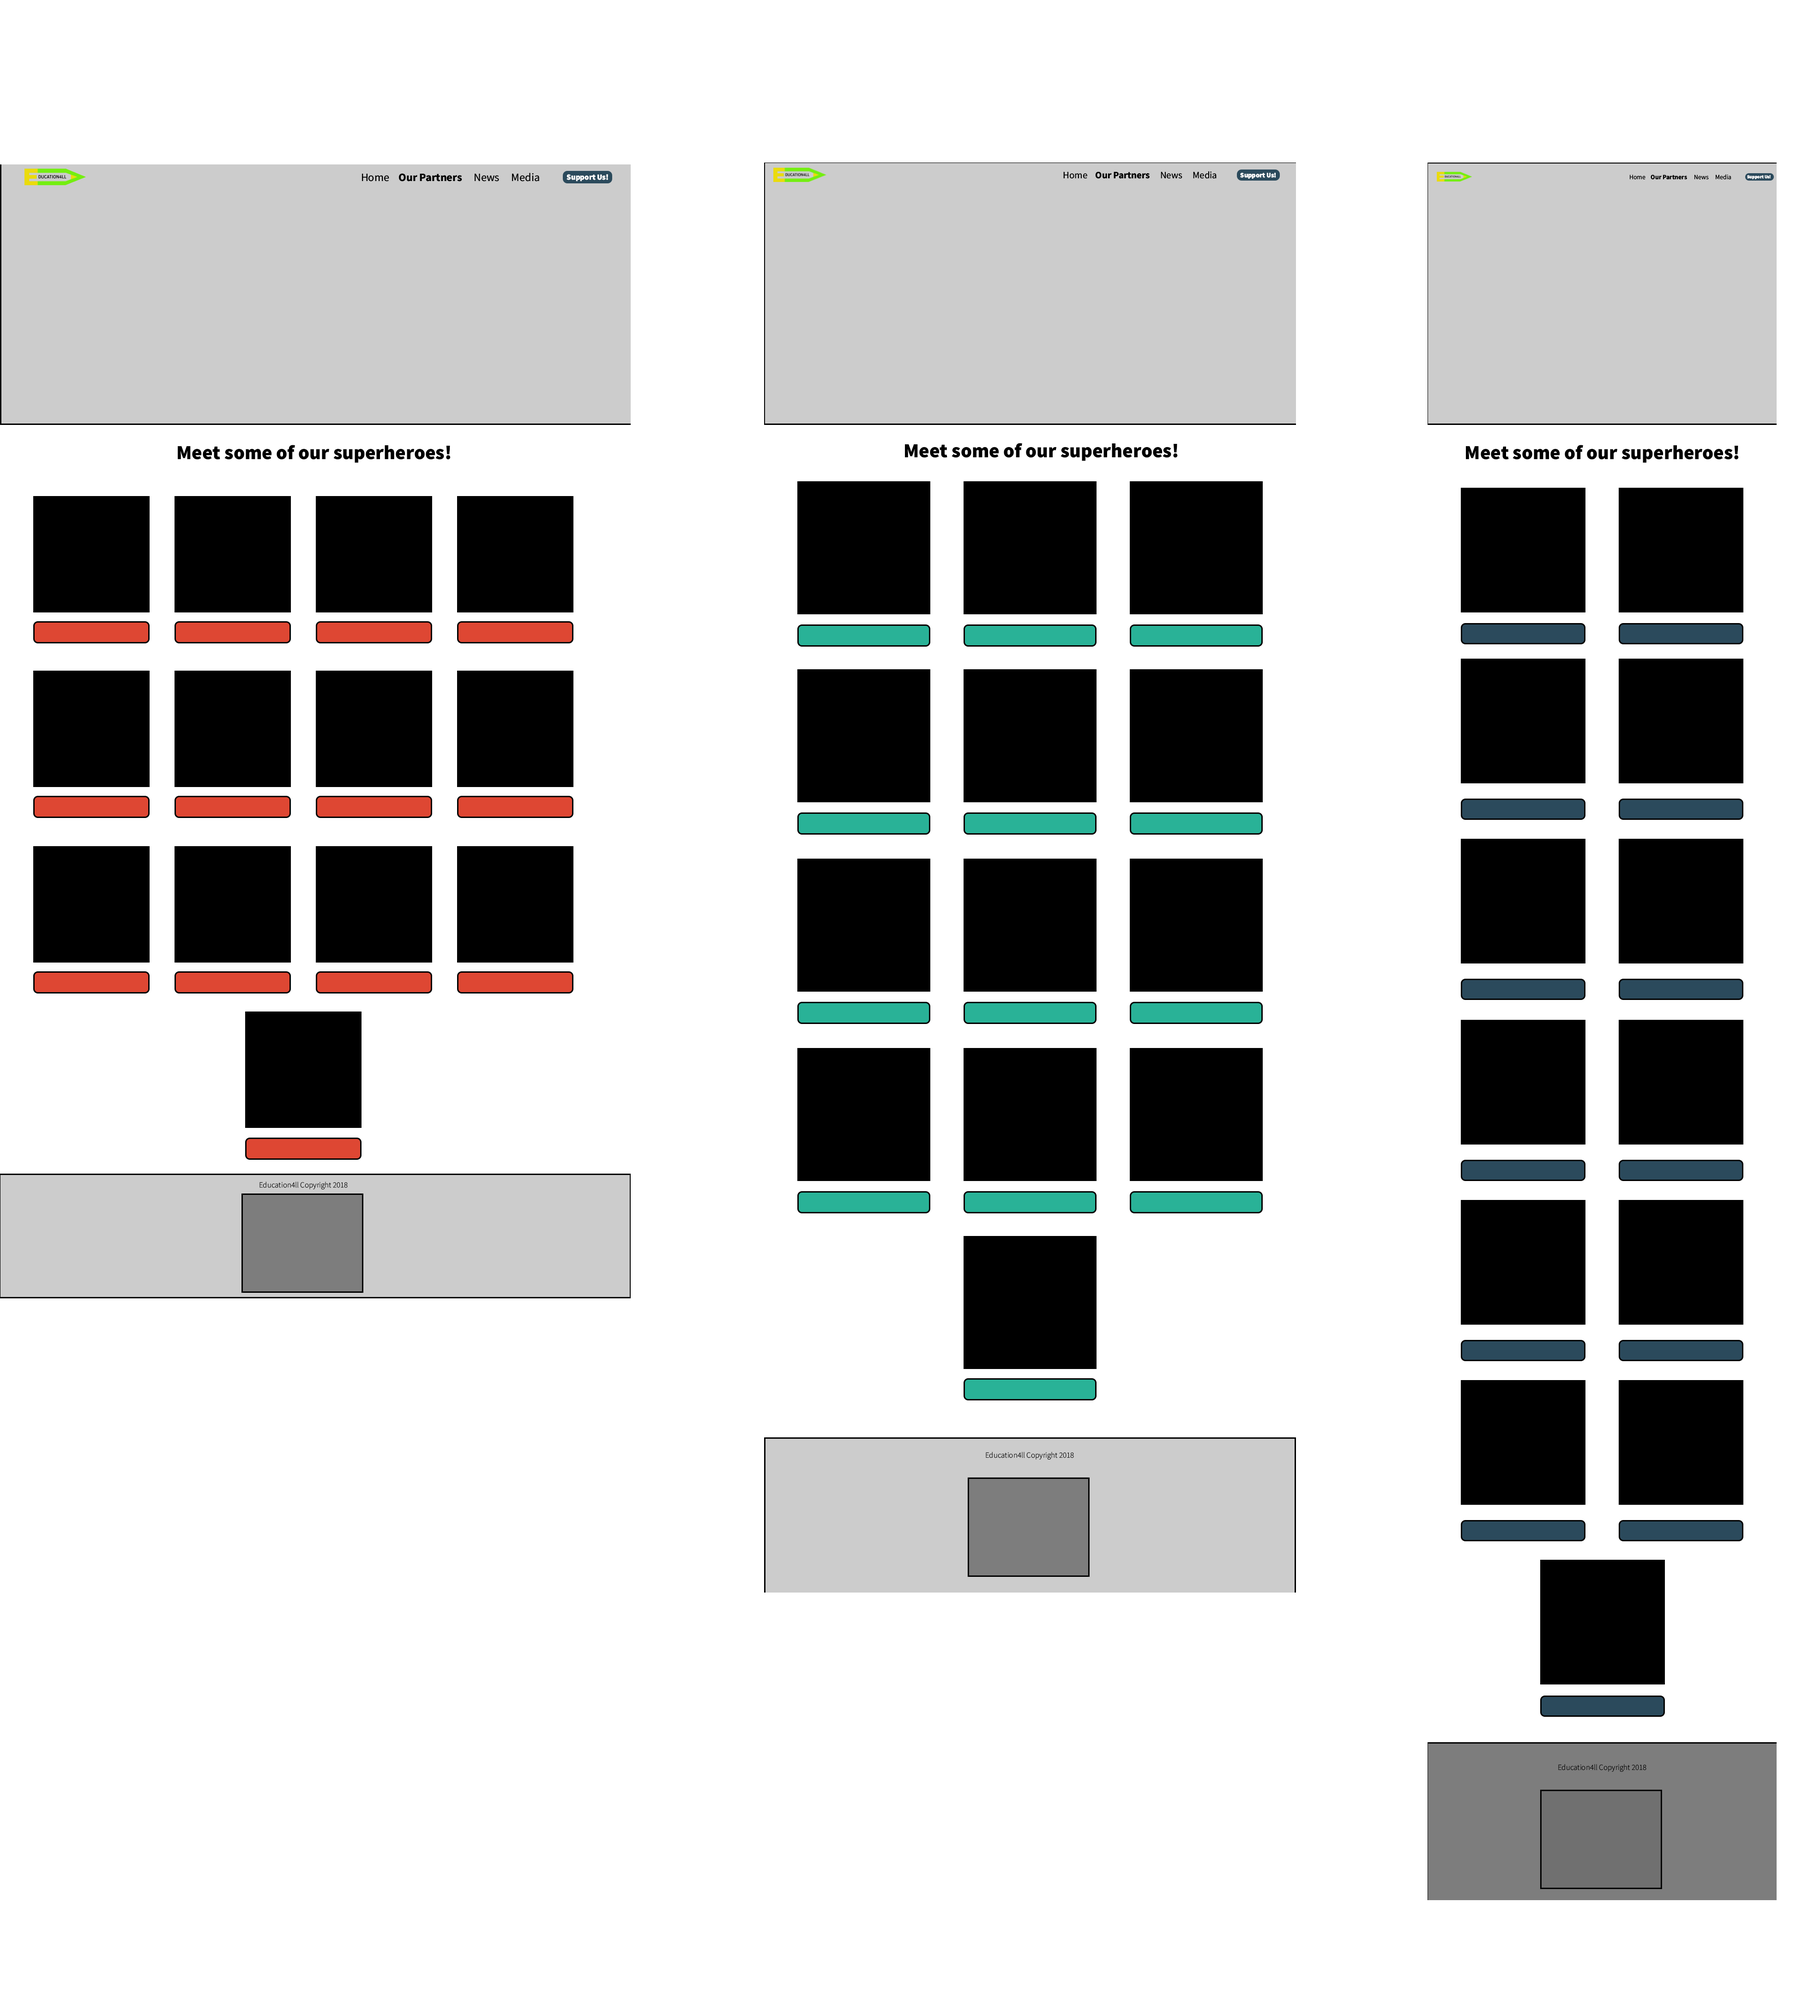
<style>
.page{position:relative;width:1820px;height:1999px;background:#ffffff}
.page>*{position:absolute;margin:0}
.t1{font:11.3px "SourceSansRoman-Bold";color:#000000}
.t2{font:11.3px "SourceSansRoman-Regular";color:#000000}
.t3{font:9.7px "SourceSansRoman-Bold";color:#000000}
.t4{font:9.7px "SourceSansRoman-Regular";color:#000000}
.t5{font:6.8px "SourceSansRoman-Black";color:#ffffff}
.t6{font:7.9px "SourceSansRoman-Black";color:#ffffff}
.t7{font:6.6px "SourceSansRoman-Bold";color:#000000}
.t8{font:6.6px "SourceSansRoman-Regular";color:#000000}
.t9{font:4.6px "SourceSansRoman-Black";color:#ffffff}
.t10{font:19.9px "SourceSansRoman-Black";color:#000000}
.t11{font:7.9px "SourceSansRoman-Light";color:#000000}
</style>
<div class="page">
<p class="t1" style="left:362px;top:173px;width:177px;height:8px"><span class="t2">Home </span>Our Partners<span class="t2">  News  Media</span></p>
<p class="t3" style="left:1063px;top:171px;width:154px;height:8px"><span class="t4">Home </span>Our Partners<span class="t4">  News  Media</span></p>
<p class="t5" style="left:1240px;top:173px;width:36px;height:6px">Support Us!</p>
<p class="t6" style="left:567px;top:174px;width:41px;height:7px">Support Us!</p>
<p class="t7" style="left:1630px;top:174px;width:102px;height:6px"><span class="t8">Home </span>Our Partners<span class="t8">  News  Media</span></p>
<p class="t9" style="left:1747px;top:175px;width:24px;height:4px">Support Us!</p>
<p class="t10" style="left:178px;top:445px;width:273px;height:18px">Meet some of our superheroes!</p>
<p class="t10" style="left:905px;top:443px;width:273px;height:18px">Meet some of our superheroes!</p>
<p class="t10" style="left:1466px;top:445px;width:273px;height:18px">Meet some of our superheroes!</p>
<p class="t11" style="left:260px;top:1181px;width:88px;height:8px">Education4ll Copyright 2018</p>
<p class="t11" style="left:986px;top:1451px;width:88px;height:8px">Education4ll Copyright 2018</p>
<p class="t11" style="left:1559px;top:1764px;width:88px;height:7px">Education4ll Copyright 2018</p>
</div>
